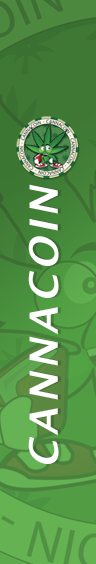
<style>
.page{position:relative;width:96px;height:564px}
.page>*{position:absolute;margin:0}
.t1{font:39.4px "LucidaSans-DemiItalic";letter-spacing:0.1em;color:#ffffff}
</style>
<div class="page">
<p class="t1" style="left:28px;top:184px;width:31px;height:280px;rotate:-90deg">CANNACOIN</p>
</div>
